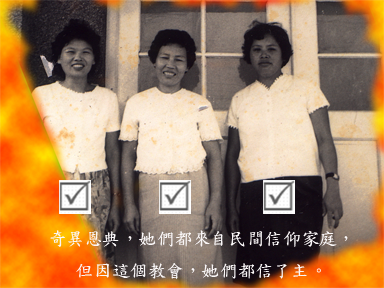
<style>
.page{position:relative;width:384px;height:288px}
.page>*{position:absolute;margin:0}
.t1{font:18px "DFKaiShu-SB-Estd-BF";color:#faf7f8}
</style>
<div class="page">
<p class="t1" style="left:50px;top:230px;width:298px;height:49px;text-align:center">奇異恩典，她們都來自民間信仰家庭，<br>但因這個教會，她們都信了主。</p>
</div>
